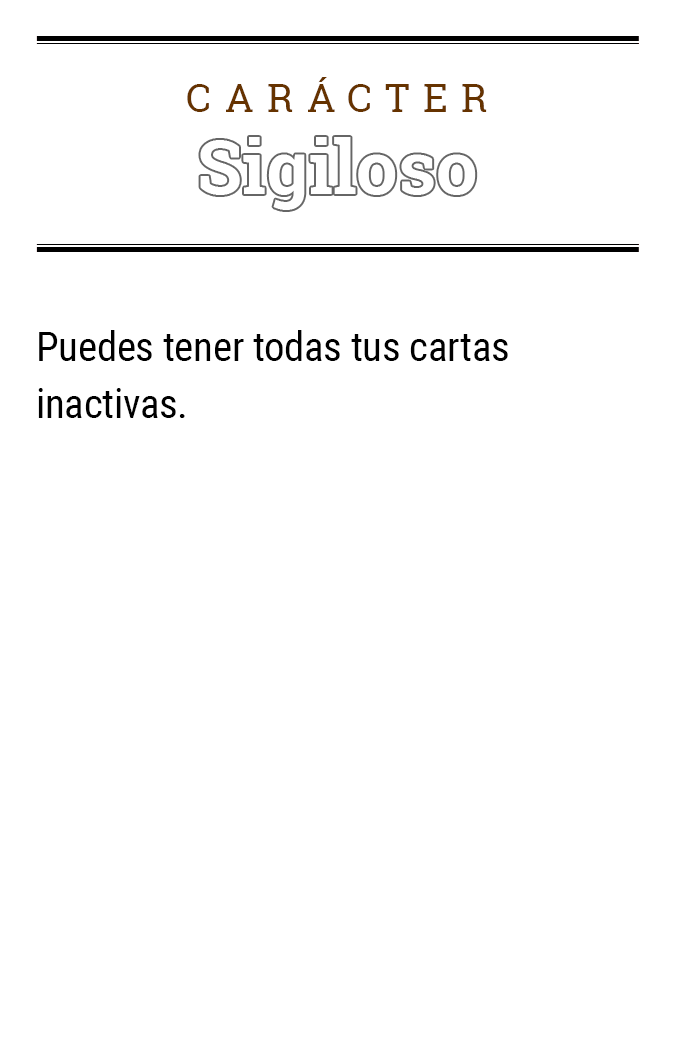
<style>
.page{position:relative;width:675px;height:1050px;background:#ffffff}
.page>*{position:absolute;margin:0}
.t1{font:39.2px "RobotoSlab-Regular";letter-spacing:0.34em;color:#663300}
.t2{font:41.1px/57.1px "RobotoCondensed-Regular";letter-spacing:-0.01em;color:#000000}
</style>
<div class="page">
<p class="t1" style="left:187px;top:77px;width:300px;height:35px">CARÁCTER</p>
<p class="t2" style="left:38px;top:330px;width:470px;height:88px">Puedes tener todas tus cartas inactivas.</p>
</div>
